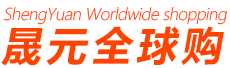
<style>
.page{position:relative;width:230px;height:68px;background:#ffffff}
.page>*{position:absolute;margin:0}
.t1{font:16px "MicrosoftYaHeiLight";letter-spacing:-0.03em;color:#ff4400;font-style:italic}
.t2{font:40px "MicrosoftYaHei-Bold";letter-spacing:0.125em;color:#ff4400;font-style:italic}
</style>
<div class="page">
<p class="t1" style="left:4px;top:7px;width:223px;height:18px">ShengYuan Worldwide shopping</p>
<p class="t2" style="left:1px;top:26px;width:223px;height:40px">晟元全球购</p>
</div>
